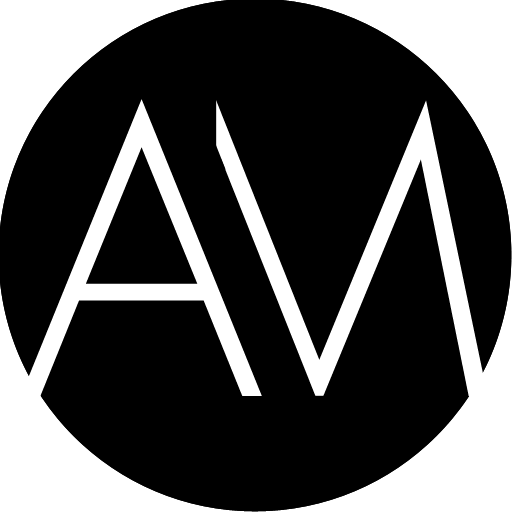
<style>
.page{position:relative;width:512px;height:512px;background:#000000}
.page>*{position:absolute;margin:0}
.t1{font:381.2px "FuturaICGLight";letter-spacing:-0.39em;color:#ffffff}
</style>
<div class="page">
<p class="t1" style="left:21px;top:99px;width:241px;height:297px">A</p>
<p class="t1" style="left:153px;top:99px;width:335px;height:307px">M</p>
</div>
